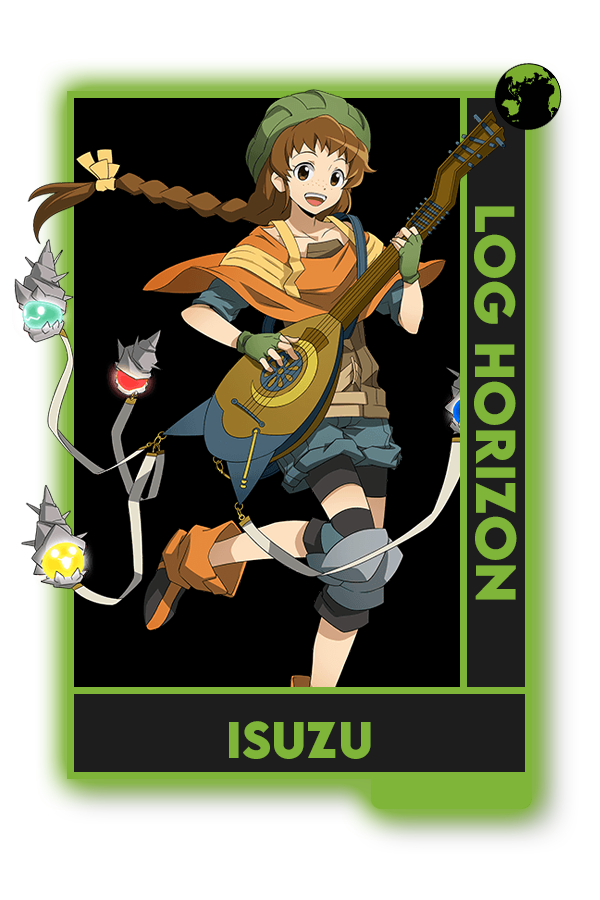
<style>
.page{position:relative;width:600px;height:900px;background:#000000}
.page>*{position:absolute;margin:0}
.t1{font:50px "LEMONMILK-Bold";color:#7fad41}
.t2{font:45.8px "LEMONMILK-Bold";color:#7fad41}
</style>
<div class="page">
<p class="t1" style="left:474px;top:206px;width:43px;height:394px;rotate:90deg">Log Horizon</p>
<p class="t2" style="left:229px;top:721px;width:142px;height:38px">Isuzu</p>
</div>
